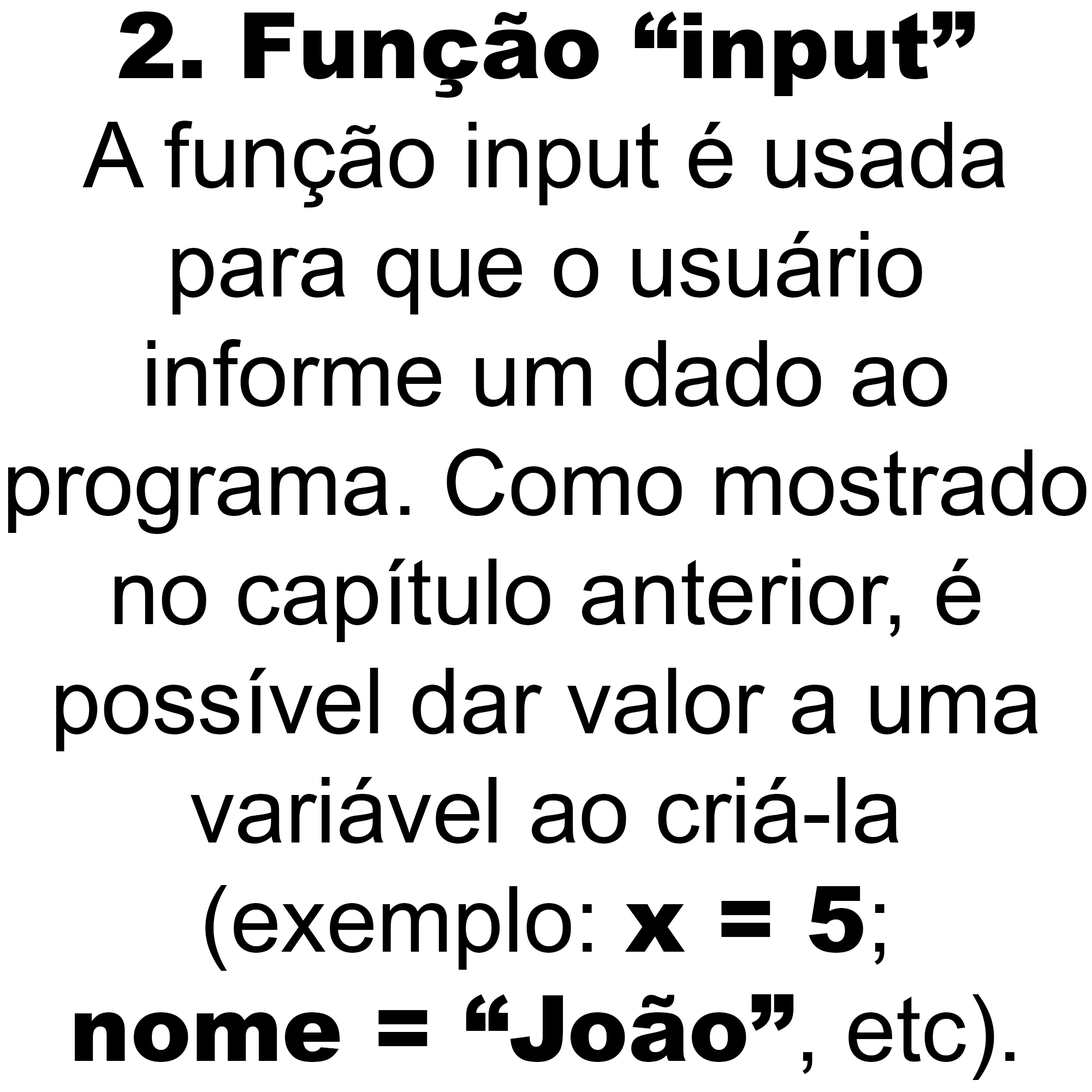
<style>
.page{position:relative;width:1092px;height:1092px;background:#ffffff}
.page>*{position:absolute;margin:0}
.t1{font:91px "ArialMT";color:#000000}
.t2{font:91px "Arial-Black";color:#000000}
</style>
<div class="page">
<p class="t1" style="left:8px;top:11px;width:1079px;height:1069px;text-align:center"><span class="t2">2. Função “input”<br></span>A função input é usada<br>para que o usuário<br>informe um dado ao<br>programa. Como mostrado<br>no capítulo anterior, é<br>possível dar valor a uma<br>variável ao criá-la<br>(exemplo: <span class="t2">x = 5</span>;<br><span class="t2">nome = “João”</span>, etc).</p>
</div>
